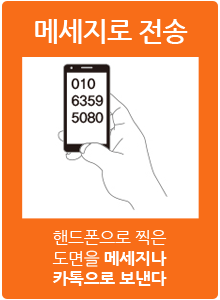
<style>
.page{position:relative;width:220px;height:300px;background:#f86d18}
.page>*{position:absolute;margin:0}
.t1{font:26.7px "NanumGothicBold";letter-spacing:-0.025em;color:#ffffff;text-transform:uppercase}
.t2{font:17.1px "NanumGothicExtraBold";letter-spacing:-0.025em;color:#ffffff;text-transform:uppercase}
.t3{font:17.1px "NanumGothic";letter-spacing:-0.025em;color:#ffffff;text-transform:uppercase}
</style>
<div class="page">
<p class="t1" style="left:35px;top:19px;width:153px;height:25px">메세지로 전송</p>
<p class="t2" style="left:52px;top:230px;width:115px;height:56px;text-align:center"><span class="t3">핸드폰으로 찍은<br>도면을 </span>메세지나<br>카톡으로 보낸다</p>
</div>
